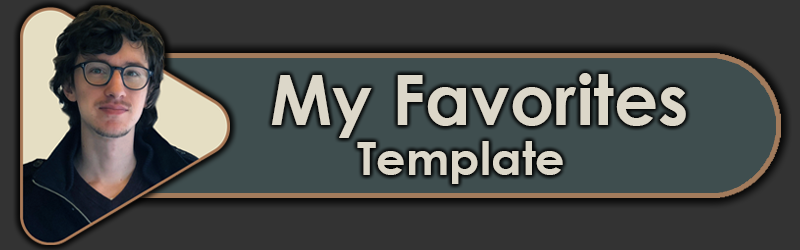
<style>
.page{position:relative;width:800px;height:250px;background:#333333}
.page>*{position:absolute;margin:0}
.t1{font:69.3px "CenturyGothic-Bold";color:#dcd7c9}
.t2{font:46.2px "CenturyGothic-Bold";color:#dcd7c9}
</style>
<div class="page">
<p class="t1" style="left:271px;top:73px;width:415px;height:65px">My Favorites</p>
<p class="t2" style="left:357px;top:141px;width:206px;height:43px">Template</p>
</div>
